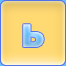
<style>
.page{position:relative;width:66px;height:66px;background:#ffd972}
.page>*{position:absolute;margin:0}
.t1{font:41px "Tahoma-Bold"}
</style>
<div class="page">
<p class="t1" style="left:23px;top:24px;width:21px;height:23px">ь</p>
<p class="t1" style="left:23px;top:24px;width:21px;height:23px">ь</p>
</div>
